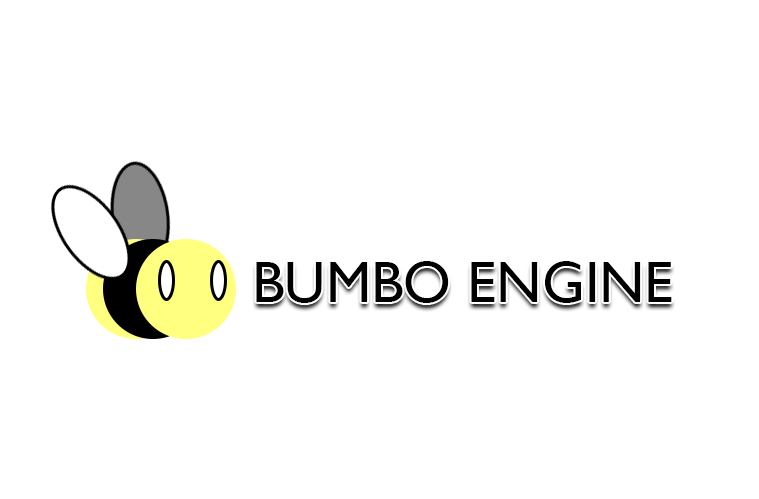
<style>
.page{position:relative;width:759px;height:499px;background:#ffffff}
.page>*{position:absolute;margin:0}
.t1{font:58px "GillSansMT";color:#000000}
</style>
<div class="page">
<p class="t1" style="left:256px;top:261px;width:416px;height:42px">BUMBO ENGINE</p>
</div>
